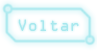
<style>
.page{position:relative;width:97px;height:52px}
.page>*{position:absolute;margin:0}
.t1{font:14.7px "OCRAStd";color:#a8e8ee}
</style>
<div class="page">
<p class="t1" style="left:18px;top:19px;width:61px;height:12px">Voltar</p>
</div>
